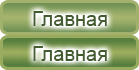
<style>
.page{position:relative;width:139px;height:70px}
.page>*{position:absolute;margin:0}
.t1{font:20px "ArialMT";color:#435c2f}
</style>
<div class="page">
<p class="t1" style="left:33px;top:11px;width:74px;height:15px">Главная</p>
<p class="t1" style="left:33px;top:46px;width:74px;height:15px">Главная</p>
</div>
